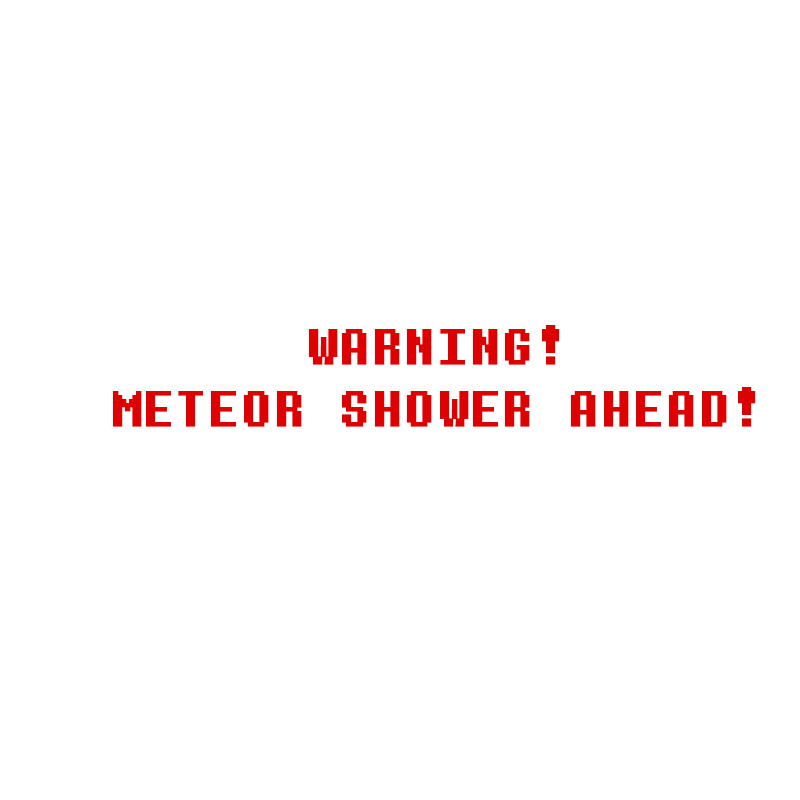
<style>
.page{position:relative;width:800px;height:800px;background:#ffffff}
.page>*{position:absolute;margin:0}
.t1{font:51.8px "DeterminationMono";color:#dd0101;font-weight:bold}
</style>
<div class="page">
<p class="t1" style="left:113px;top:325px;width:643px;height:102px;text-align:center">WARNING!<br>METEOR SHOWER AHEAD!</p>
</div>
